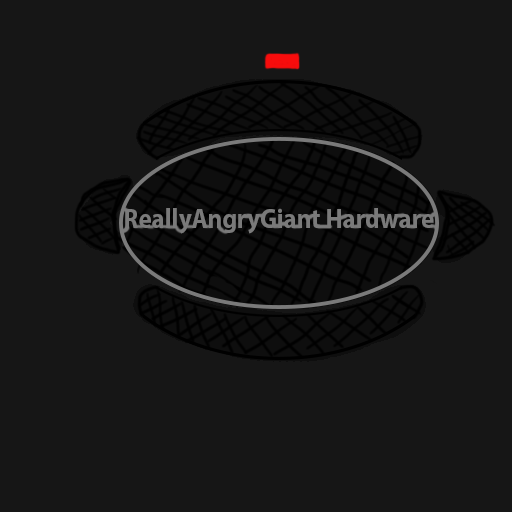
<style>
.page{position:relative;width:512px;height:512px;background:#161616}
.page>*{position:absolute;margin:0}
.t1{font:27.3px "MyriadPro-Bold";color:#7a7a7a;scale:0.91 1}
</style>
<div class="page">
<p class="t1" style="left:125px;top:208px;width:309px;height:26px">ReallyAngryGiant Hardware</p>
</div>
